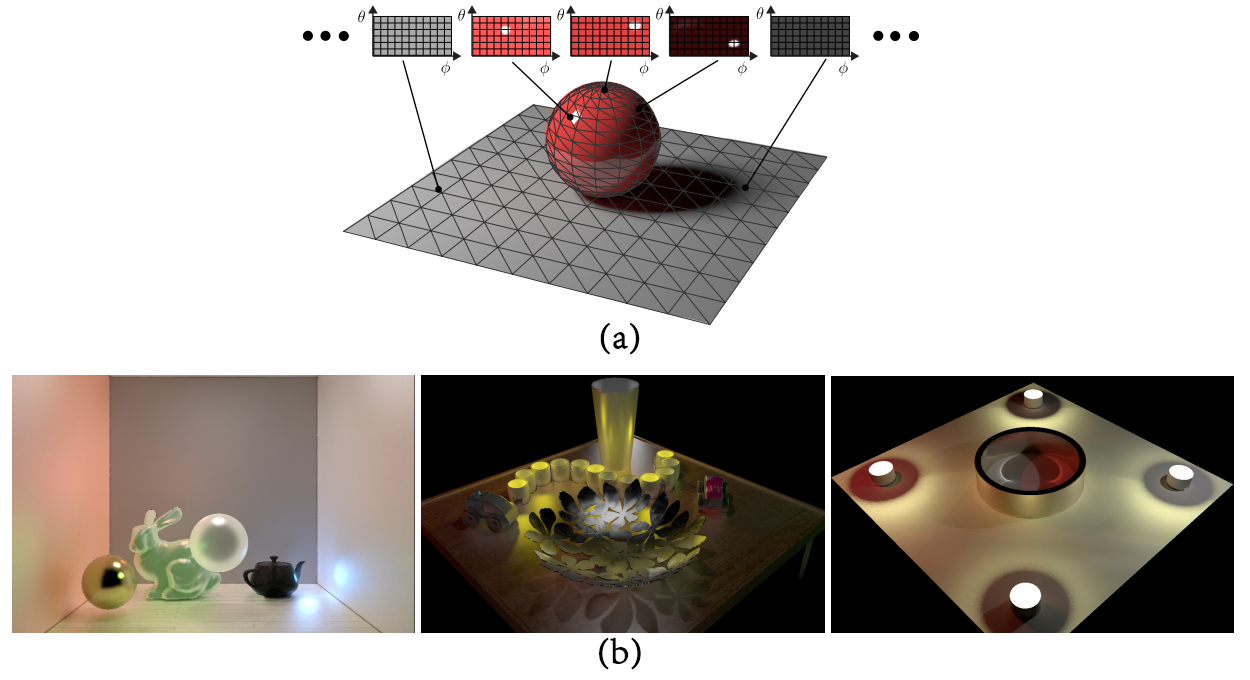
<style>
.page{position:relative;width:1250px;height:680px;background:#ffffff}
.page>*{position:absolute;margin:0}
.t1{font:36px "AdobeSongStd-Light";color:#000000;font-weight:bold}
</style>
<div class="page">
<p class="t1" style="left:600px;top:322px;width:40px;height:33px">(a)</p>
<p class="t1" style="left:599px;top:637px;width:42px;height:33px">(b)</p>
</div>
